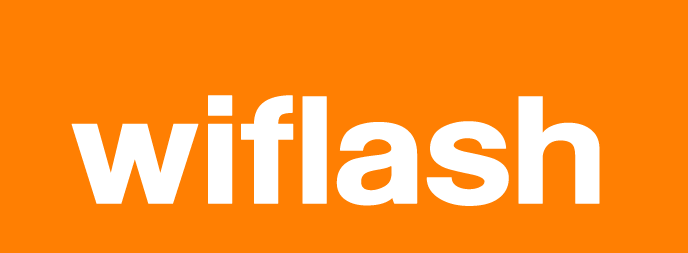
<style>
.page{position:relative;width:688px;height:253px;background:#ff7f02}
.page>*{position:absolute;margin:0}
.t1{font:148px "Coolvetica";color:#ffffff;font-weight:bold;scale:1.12 1}
</style>
<div class="page">
<p class="t1" style="left:71px;top:95px;width:529px;height:111px">wiflash</p>
</div>
